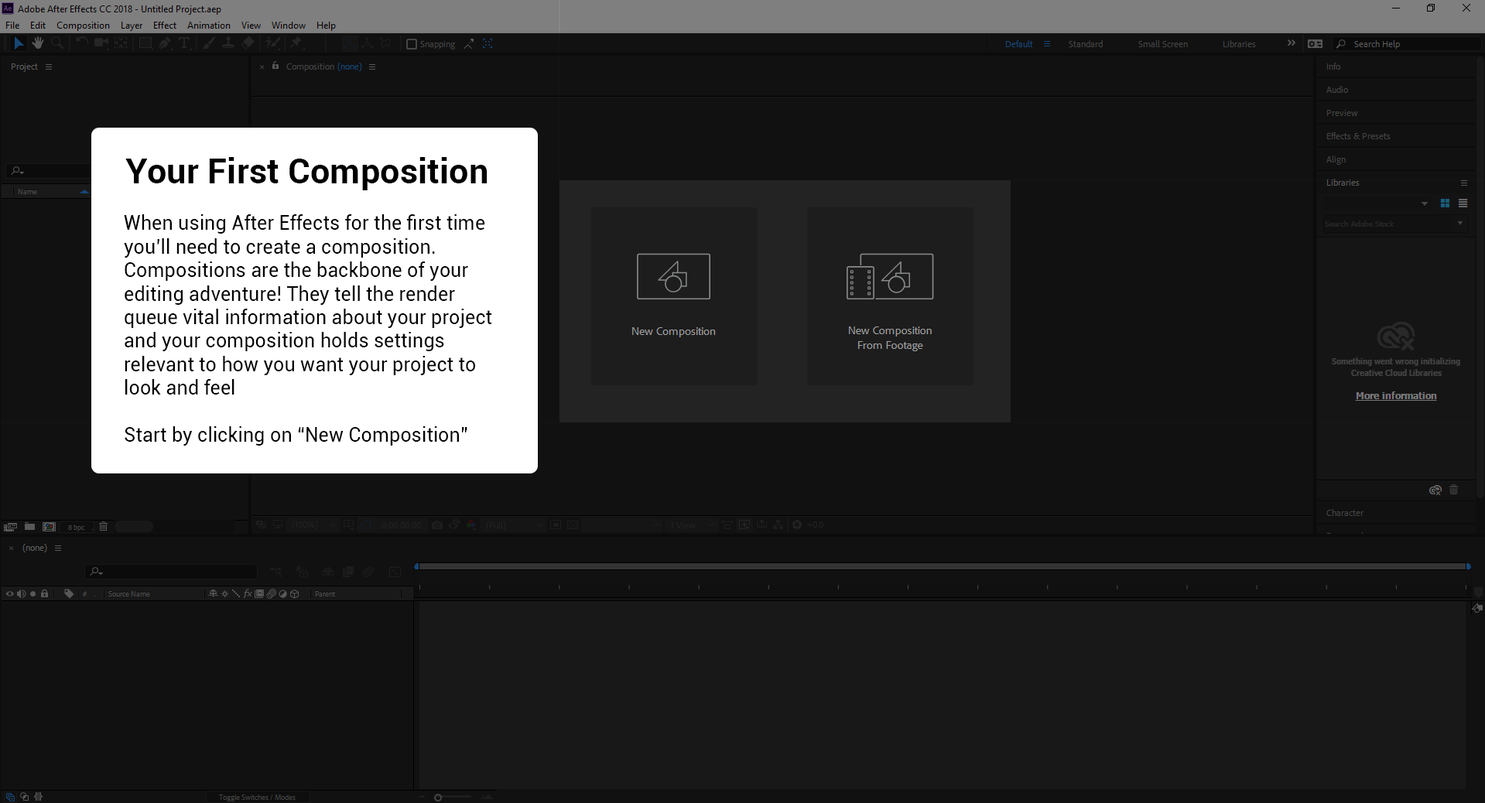
<style>
.page{position:relative;width:1485px;height:803px;background:#111111}
.page>*{position:absolute;margin:0}
.t1{font:19.6px "Roboto-Regular";color:#000000}
.t2{font:35.1px "Roboto-Bold";color:#000000}
</style>
<div class="page">
<p class="t1" style="left:124px;top:157px;width:368px;height:289px"><span class="t2">Your First Composition<br></span><br>When using After Effects for the first time<br>you’ll need to create a composition.<br>Compositions are the backbone of your<br>editing adventure! They tell the render<br>queue vital information about your project<br>and your composition holds settings<br>relevant to how you want your project to<br>look and feel<br><br>Start by clicking on “New Composition”</p>
</div>
